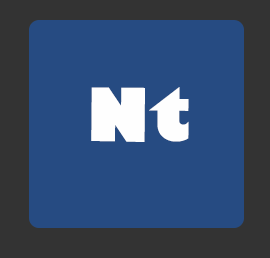
<style>
.page{position:relative;width:270px;height:258px;background:#264b82}
.page>*{position:absolute;margin:0}
.t1{font:72px "GillSans-UltraBold";color:#fefefe}
</style>
<div class="page">
<p class="t1" style="left:91px;top:87px;width:98px;height:55px;rotate:1deg">Nt</p>
</div>
